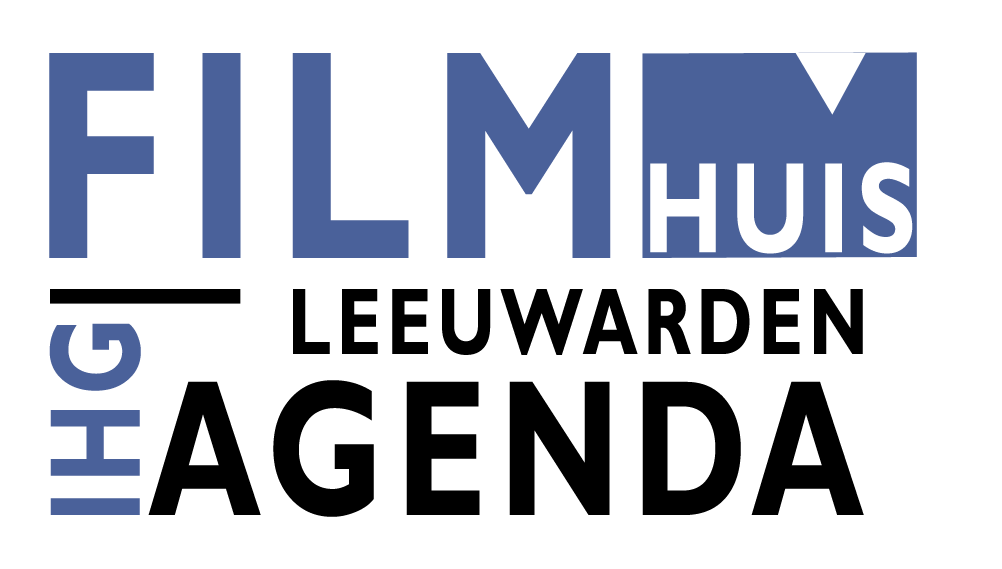
<style>
.page{position:relative;width:1002px;height:569px;background:#ffffff}
.page>*{position:absolute;margin:0}
.t1{font:300px "GillSansMT-Bold";letter-spacing:0.08em;color:#4a619a;scale:0.74 1}
.t2{font:130px "GillSansMT-Bold";letter-spacing:0.08em;color:#ffffff;scale:0.74 1}
.t3{font:95px "GillSansMT-Bold";letter-spacing:0.08em;color:#000000;scale:0.74 1}
.t4{font:130px "GillSansMT-Bold";letter-spacing:0.08em;color:#4a619a;scale:0.74 1}
.t5{font:195px "GillSansMT-Bold";letter-spacing:0.08em;color:#000000;scale:0.74 1}
</style>
<div class="page">
<p class="t1" style="left:49px;top:53px;width:562px;height:205px">FILM</p>
<p class="t2" style="left:650px;top:162px;width:263px;height:92px">HUIS</p>
<p class="t3" style="left:293px;top:289px;width:570px;height:66px">LEEUWARDEN</p>
<p class="t4" style="left:49px;top:323px;width:92px;height:192px;rotate:-90deg">IHG</p>
<p class="t5" style="left:148px;top:380px;width:716px;height:137px">AGENDA</p>
</div>
